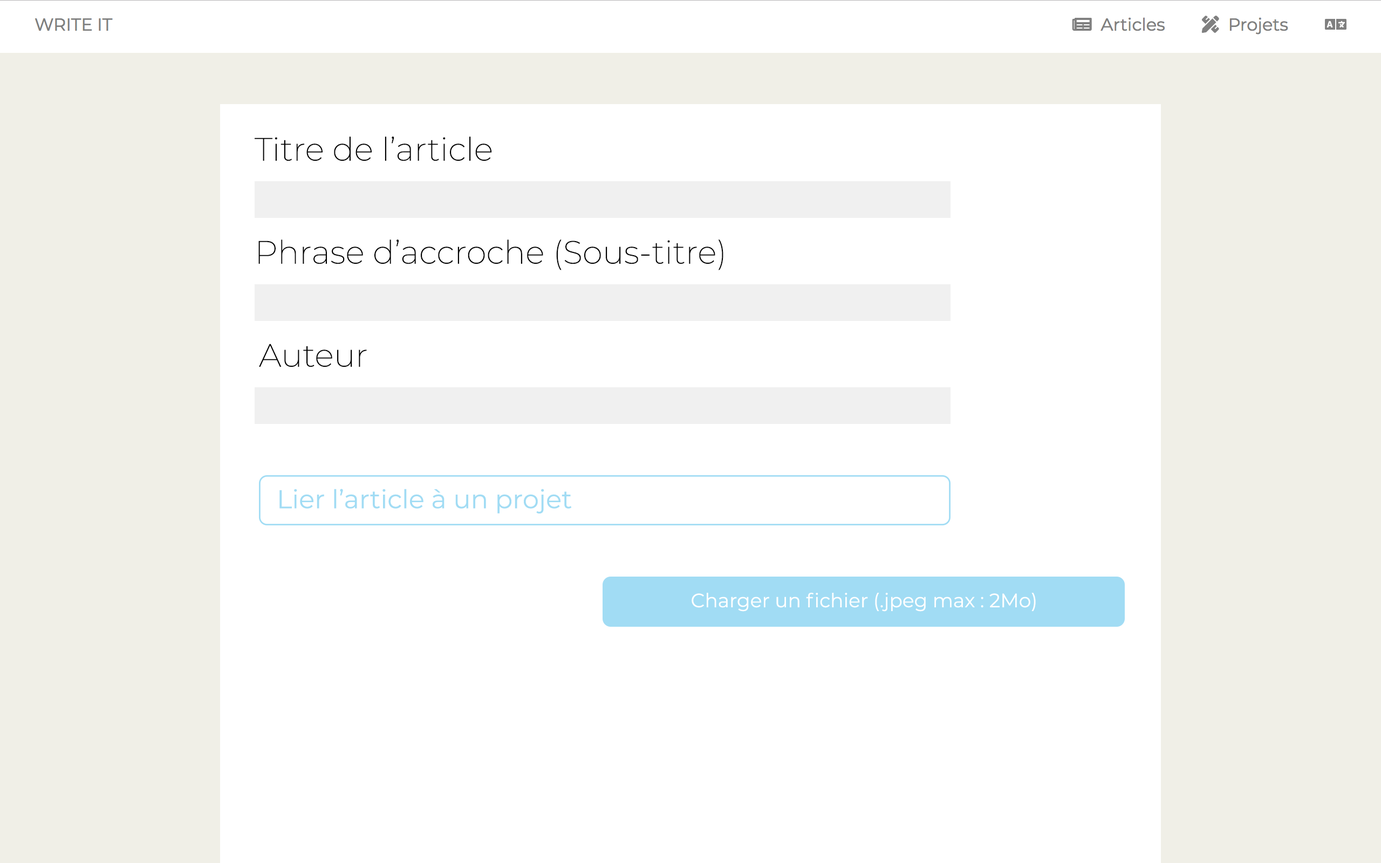
<style>
.page{position:relative;width:1381px;height:863px;background:#ffffff}
.page>*{position:absolute;margin:0}
.t1{font:32.4px "Montserrat-ExtraLight";color:#000000}
.t2{font:25.9px "Montserrat-Regular";color:#a1dcf4}
.t3{font:19.4px "Montserrat-Regular";color:#ffffff}
</style>
<div class="page">
<p class="t1" style="left:255px;top:137px;width:237px;height:24px">Titre de l’article</p>
<p class="t1" style="left:258px;top:240px;width:466px;height:30px">Phrase d’accroche (Sous-titre)</p>
<p class="t1" style="left:259px;top:344px;width:108px;height:23px">Auteur</p>
<p class="t2" style="left:279px;top:489px;width:293px;height:25px">Lier l’article à un projet</p>
<p class="t3" style="left:692px;top:592px;width:344px;height:20px">Charger un fichier (.jpeg max : 2Mo)</p>
</div>
